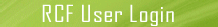
<style>
.page{position:relative;width:218px;height:27px}
.page>*{position:absolute;margin:0}
.t1{font:22.4px "AgencyFB-Reg";letter-spacing:0.02em;color:#feffff;scale:1.2 1}
</style>
<div class="page">
<p class="t1" style="left:42px;top:4px;width:132px;height:22px">RCF User Login</p>
</div>
